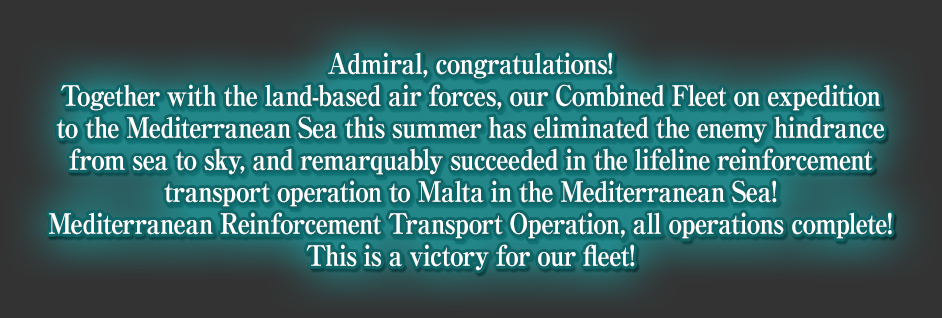
<style>
.page{position:relative;width:942px;height:318px}
.page>*{position:absolute;margin:0}
.t1{font:28px/32px "RyuminPro-ExBold";letter-spacing:-0.04em;color:#ffffff;scale:0.9 1}
</style>
<div class="page">
<p class="t1" style="left:49px;top:52px;width:843px;height:219px;text-align:center">Admiral, congratulations!<br>Together with the land-based air forces, our Combined Fleet on expedition<br>to the Mediterranean Sea this summer has eliminated the enemy hindrance<br>from sea to sky, and remarquably succeeded in the lifeline reinforcement<br>transport operation to Malta in the Mediterranean Sea!<br>Mediterranean Reinforcement Transport Operation, all operations complete!<br>This is a victory for our fleet!</p>
</div>
